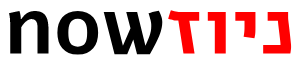
<style>
.page{position:relative;width:300px;height:65px;background:#ffffff}
.page>*{position:absolute;margin:0}
.t1{font:82px "Alef-Bold";color:#ff0000}
.t2{font:51px "Alef-Regular";color:#000000}
.t3{font:82px "Alef-Bold";color:#000000}
</style>
<div class="page">
<p class="t1" style="left:9px;top:10px;width:283px;height:45px"><span class="t2"> </span><span class="t3">now</span>ניוז</p>
</div>
